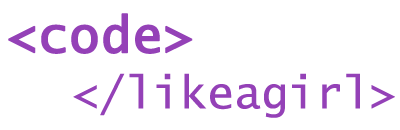
<style>
.page{position:relative;width:400px;height:130px;background:#ffffff}
.page>*{position:absolute;margin:0}
.t1{font:50px "LucidaConsole";color:#9441b7;font-weight:bold}
.t2{font:45px "LucidaConsole";color:#9441b7}
</style>
<div class="page">
<p class="t1" style="left:8px;top:13px;width:185px;height:41px">&lt;code&gt;</p>
<p class="t2" style="left:73px;top:73px;width:322px;height:45px">&lt;/likeagirl&gt;</p>
</div>
